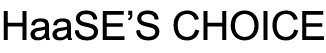
<style>
.page{position:relative;width:326px;height:53px;background:#ffffff}
.page>*{position:absolute;margin:0}
.t1{font:40px "ArialMT";letter-spacing:-0.01em;color:#000000}
</style>
<div class="page">
<p class="t1" style="left:3px;top:10px;width:321px;height:31px">HaaSE’S CHOICE</p>
</div>
